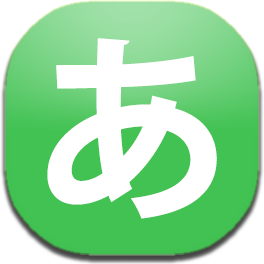
<style>
.page{position:relative;width:264px;height:264px;background:#ffffff}
.page>*{position:absolute;margin:0}
.t1{font:199px "KozGoPr6N-Bold";color:#ffffff}
</style>
<div class="page">
<p class="t1" style="left:47px;top:38px;width:170px;height:181px">あ</p>
</div>
